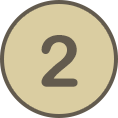
<style>
.page{position:relative;width:118px;height:118px;background:#dacda1}
.page>*{position:absolute;margin:0}
.t1{font:72px "ArialRoundedMTBold";letter-spacing:-0.04em;color:#635b4e;text-transform:uppercase}
</style>
<div class="page">
<p class="t1" style="left:41px;top:35px;width:37px;height:52px">2</p>
</div>
